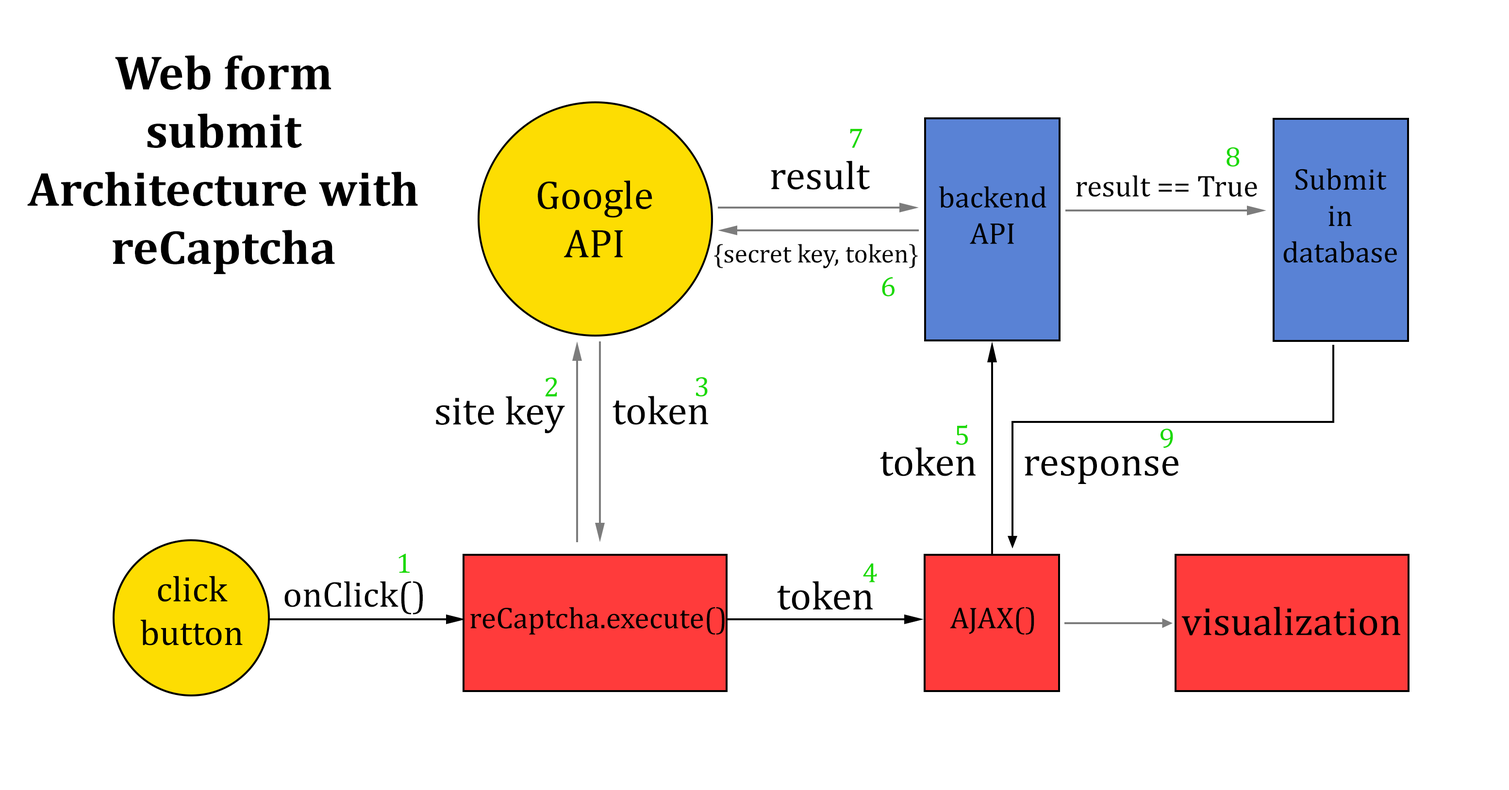
<style>
.page{position:relative;width:1509px;height:790px;background:#ffffff}
.page>*{position:absolute;margin:0}
.t1{font:48.5px "Cambria-Bold";color:#000000}
.t2{font:28.3px "Cambria";color:#1ad900}
.t3{font:40.4px "Cambria";color:#000000}
.t4{font:30.3px "Cambria";color:#000000}
.t5{font:26.3px "Cambria";color:#000000}
.t6{font:36.4px "Cambria";color:#000000}
</style>
<div class="page">
<p class="t1" style="left:27px;top:55px;width:391px;height:220px;text-align:center">Web form<br>submit<br>Architecture with<br>reCaptcha</p>
<p class="t2" style="left:850px;top:129px;width:12px;height:19px">7</p>
<p class="t2" style="left:1226px;top:147px;width:13px;height:20px">8</p>
<p class="t3" style="left:771px;top:161px;width:99px;height:29px">result</p>
<p class="t4" style="left:1283px;top:168px;width:113px;height:95px;text-align:center">Submit<br>in<br>database</p>
<p class="t3" style="left:538px;top:181px;width:114px;height:77px;text-align:center">Google<br>API</p>
<p class="t4" style="left:1076px;top:175px;width:181px;height:22px">result == True</p>
<p class="t4" style="left:938px;top:186px;width:108px;height:58px;text-align:center">backend<br>API</p>
<p class="t5" style="left:714px;top:244px;width:204px;height:24px">{secret key, token}</p>
<p class="t2" style="left:882px;top:277px;width:12px;height:19px">6</p>
<p class="t2" style="left:545px;top:378px;width:12px;height:19px">2</p>
<p class="t2" style="left:696px;top:377px;width:11px;height:20px">3</p>
<p class="t3" style="left:436px;top:396px;width:129px;height:38px">site key</p>
<p class="t3" style="left:612px;top:396px;width:96px;height:29px">token</p>
<p class="t2" style="left:956px;top:425px;width:12px;height:20px">5</p>
<p class="t2" style="left:1160px;top:429px;width:13px;height:19px">9</p>
<p class="t3" style="left:880px;top:447px;width:95px;height:29px">token</p>
<p class="t3" style="left:1024px;top:457px;width:154px;height:27px">response</p>
<p class="t2" style="left:398px;top:554px;width:12px;height:19px">1</p>
<p class="t2" style="left:863px;top:563px;width:14px;height:20px">4</p>
<p class="t6" style="left:140px;top:576px;width:103px;height:70px;text-align:center">click<br>button</p>
<p class="t6" style="left:284px;top:581px;width:139px;height:34px">onClick()</p>
<p class="t3" style="left:777px;top:581px;width:95px;height:29px">token</p>
<p class="t4" style="left:470px;top:608px;width:254px;height:27px">reCaptcha.execute()</p>
<p class="t4" style="left:950px;top:608px;width:84px;height:27px">AJAX()</p>
<p class="t3" style="left:1181px;top:607px;width:219px;height:29px">visualization</p>
</div>
